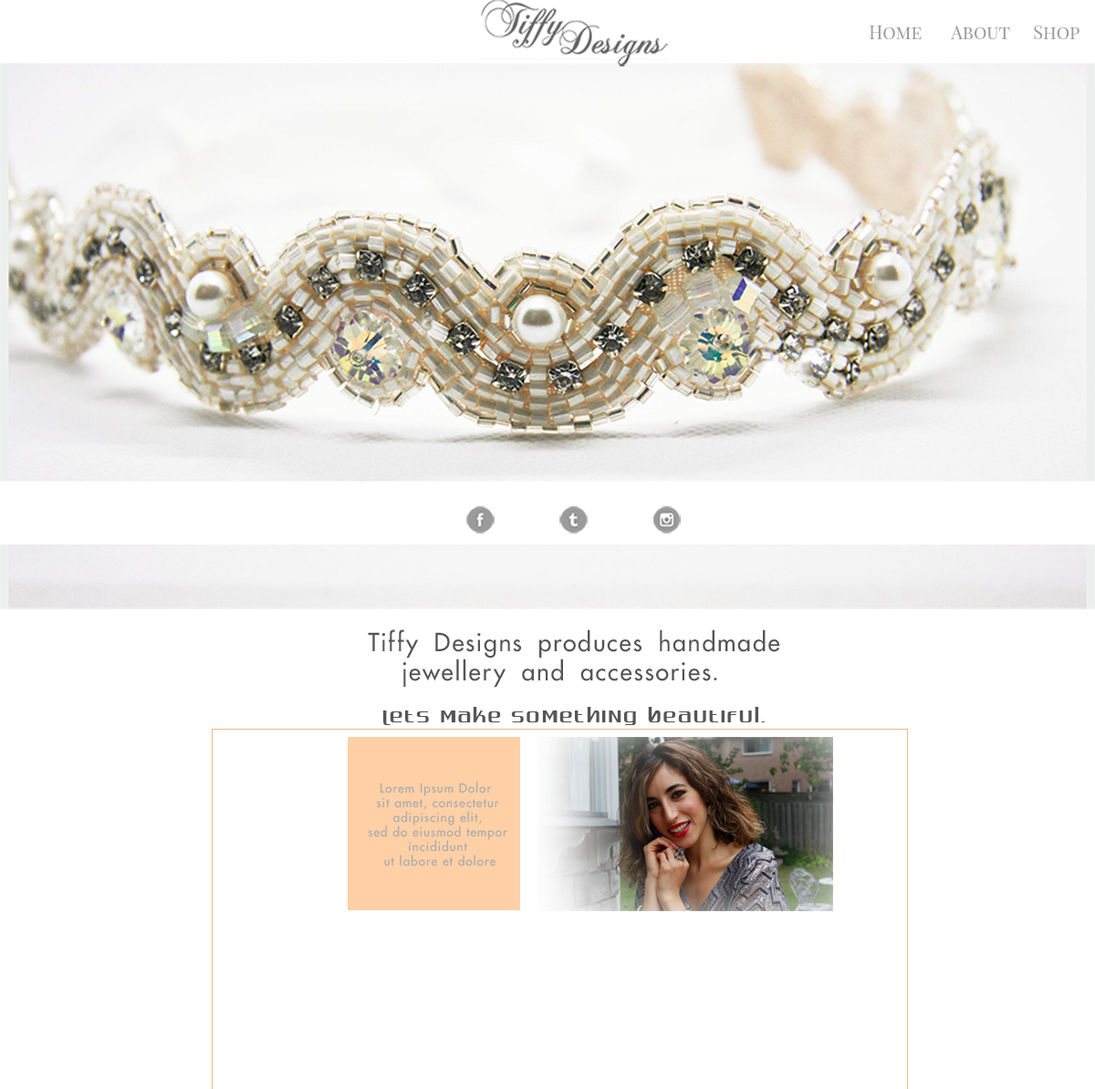
<style>
.page{position:relative;width:1095px;height:1089px;background:#ffffff}
.page>*{position:absolute;margin:0}
.t1{font:18.3px "PlayfairDisplaySC-Regular";color:#9a9a9a}
.t2{font:24.3px "FuturaLT";letter-spacing:0.08em;color:#555555}
.t3{font:24.3px "OpenSymbol";letter-spacing:0.08em;color:#555555}
.t4{font:24.3px "Quadaptor";letter-spacing:0.08em;color:#555555}
.t5{font:12.2px "FuturaLT";letter-spacing:0.08em;color:#acacac}
</style>
<div class="page">
<p class="t1" style="left:869px;top:26px;width:210px;height:13px">Home  About  Shop</p>
<p class="t2" style="left:368px;top:629px;width:412px;height:59px;text-align:center">Tiffy Designs produces handmade<br>jewellery and accessories<span class="t3">.</span></p>
<p class="t4" style="left:383px;top:707px;width:381px;height:18px">Lets make something beautiful.</p>
<p class="t5" style="left:368px;top:782px;width:139px;height:85px;text-align:center">Lorem Ipsum Dolor  <br>sit amet, consectetur <br>adipiscing elit, <br>sed do eiusmod tempor <br>incididunt <br>ut labore et dolore</p>
</div>
